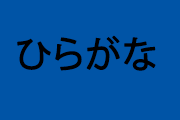
<style>
.page{position:relative;width:180px;height:120px;background:#0054a6}
.page>*{position:absolute;margin:0}
.t1{font:36px "KozGoPr6N-Regular";color:#000000;text-transform:uppercase;font-weight:bold}
</style>
<div class="page">
<p class="t1" style="left:17px;top:35px;width:139px;height:36px">ひらがな</p>
</div>
